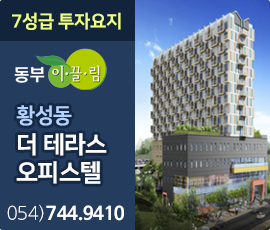
<style>
.page{position:relative;width:270px;height:230px;background:#243c5e}
.page>*{position:absolute;margin:0}
.t1{font:18px "NanumSquareOTFEB";letter-spacing:-0.025em;color:#eeff82}
.t2{font:24px/28px "NanumSquareOTFEB";letter-spacing:-0.025em;color:#ffffff}
.t3{font:21px/28px "NanumSquareOTFEB";letter-spacing:-0.025em;color:#b3d2fe}
.t4{font:18px "NanumBarunGothicOTFBold";color:#ffffff}
.t5{font:18px "NanumBarunGothicOTFUltraLight";color:#ffffff}
</style>
<div class="page">
<p class="t1" style="left:12px;top:12px;width:109px;height:18px">7성급 투자요지</p>
<p class="t2" style="left:16px;top:105px;width:91px;height:79px"><span class="t3">황성동<br></span>더 테라스<br>오피스텔</p>
<p class="t4" style="left:7px;top:204px;width:117px;height:18px"><span class="t5">054)</span>744.9410</p>
</div>
